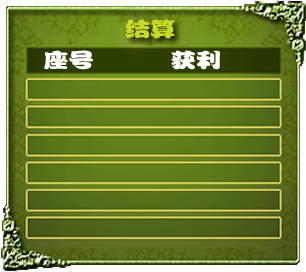
<style>
.page{position:relative;width:306px;height:272px}
.page>*{position:absolute;margin:0}
.t1{font:20px "FZPWJW--GB1-0";color:#c8db26;scale:1.26 1}
.t2{font:20px "FZPWJW--GB1-0";color:#ffffff;scale:1.26 1}
</style>
<div class="page">
<p class="t1" style="left:125px;top:19px;width:50px;height:20px">结算</p>
<p class="t2" style="left:43px;top:50px;width:50px;height:20px">座号</p>
<p class="t2" style="left:171px;top:50px;width:49px;height:20px">获利</p>
</div>
